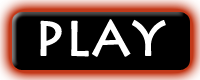
<style>
.page{position:relative;width:200px;height:80px;background:#000000}
.page>*{position:absolute;margin:0}
.t1{font:48px "LithosPro-Regular";color:#ffffff;font-weight:bold}
</style>
<div class="page">
<p class="t1" style="left:40px;top:19px;width:126px;height:38px">PLAY</p>
</div>
